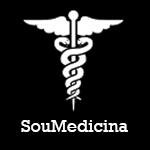
<style>
.page{position:relative;width:150px;height:150px;background:#000000}
.page>*{position:absolute;margin:0}
.t1{font:18px "Rockwell";color:#ffffff}
</style>
<div class="page">
<p class="t1" style="left:21px;top:120px;width:107px;height:12px">SouMedicina</p>
</div>
